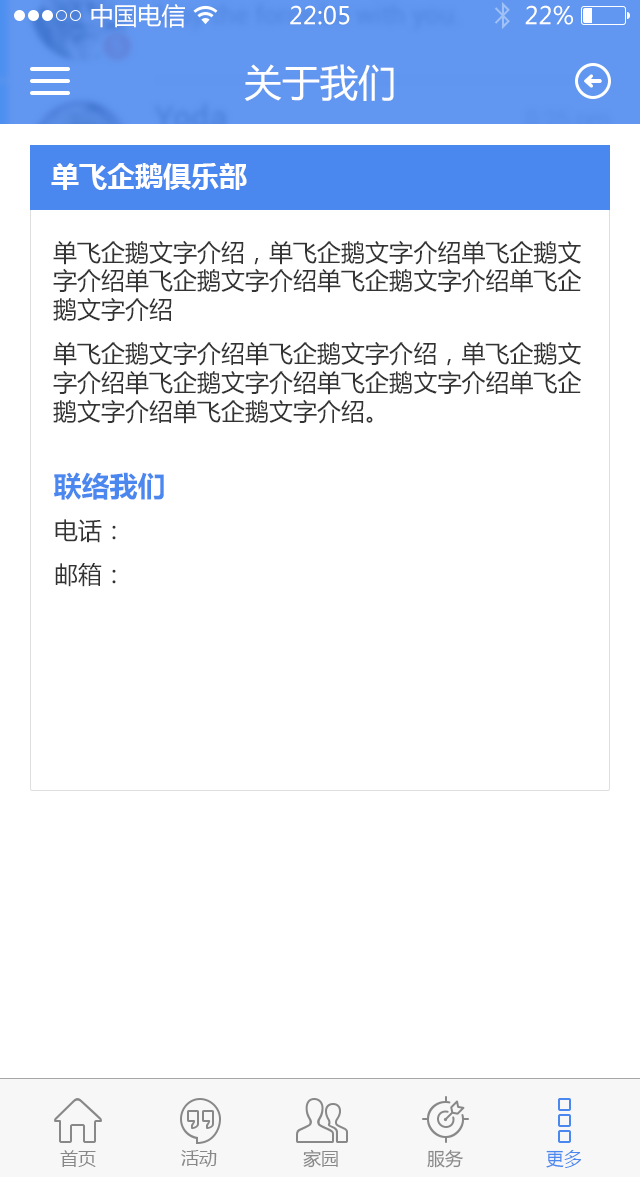
<style>
.page{position:relative;width:640px;height:1177px;background:#ffffff}
.page>*{position:absolute;margin:0}
.t1{font:24px "MicrosoftYaHei";color:#ffffff}
.t2{font:38px "MicrosoftYaHei";color:#ffffff}
.t3{font:28px "MicrosoftYaHei-Bold";color:#fefefe}
.t4{font:24px "MicrosoftYaHei";color:#333333}
.t5{font:28px "MicrosoftYaHei-Bold";color:#4a87ee}
.t6{font:18px "MicrosoftYaHei";color:#888888}
.t7{font:18px "MicrosoftYaHei";color:#4a87ee}
</style>
<div class="page">
<p class="t1" style="left:91px;top:4px;width:94px;height:24px">中国电信</p>
<p class="t1" style="left:290px;top:5px;width:60px;height:20px">22:05</p>
<p class="t1" style="left:525px;top:5px;width:48px;height:20px">22%</p>
<p class="t2" style="left:244px;top:64px;width:150px;height:37px">关于我们</p>
<p class="t3" style="left:51px;top:163px;width:196px;height:27px">单飞企鹅俱乐部</p>
<p class="t4" style="left:53px;top:240px;width:528px;height:184px">单飞企鹅文字介绍，单飞企鹅文字介绍单飞企鹅文字介绍单飞企鹅文字介绍单飞企鹅文字介绍单飞企鹅文字介绍<br>单飞企鹅文字介绍单飞企鹅文字介绍，单飞企鹅文字介绍单飞企鹅文字介绍单飞企鹅文字介绍单飞企鹅文字介绍单飞企鹅文字介绍。</p>
<p class="t5" style="left:54px;top:472px;width:110px;height:28px">联络我们</p>
<p class="t4" style="left:55px;top:519px;width:61px;height:68px">电话：<br>邮箱：</p>
<p class="t6" style="left:60px;top:1150px;width:36px;height:17px">首页</p>
<p class="t6" style="left:181px;top:1150px;width:36px;height:17px">活动</p>
<p class="t6" style="left:303px;top:1149px;width:35px;height:19px">家园</p>
<p class="t6" style="left:427px;top:1149px;width:36px;height:19px">服务</p>
<p class="t7" style="left:546px;top:1150px;width:35px;height:18px">更多</p>
</div>
